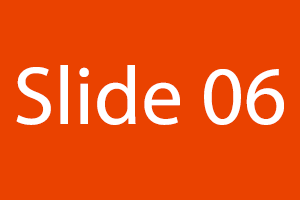
<style>
.page{position:relative;width:300px;height:200px;background:#ea4200}
.page>*{position:absolute;margin:0}
.t1{font:83px "MyriadPro-Regular";letter-spacing:0.004em;color:#ffffff}
</style>
<div class="page">
<p class="t1" style="left:16px;top:65px;width:268px;height:60px">06 Slide</p>
</div>
